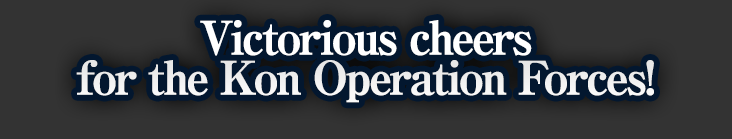
<style>
.page{position:relative;width:732px;height:139px;background:#333333}
.page>*{position:absolute;margin:0}
.t1{font:46px/40px "RyuminPro-ExBold";letter-spacing:-0.08em;color:#ffffff;font-weight:bold}
</style>
<div class="page">
<p class="t1" style="left:76px;top:20px;width:578px;height:83px;text-align:center">Victorious cheers<br>for the Kon Operation Forces!</p>
</div>
